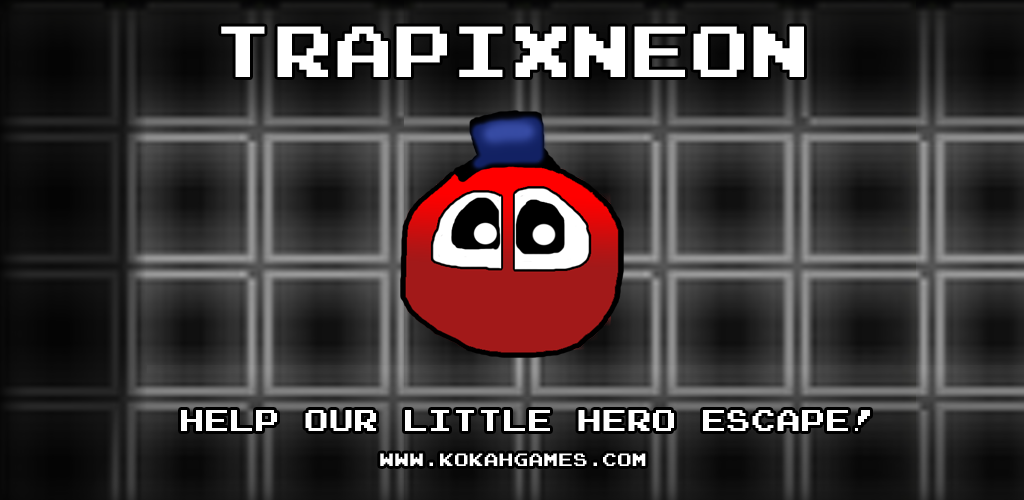
<style>
.page{position:relative;width:1024px;height:500px}
.page>*{position:absolute;margin:0}
.t1{font:72px "JoystixMonospace-Regular";color:#ffffff}
.t2{font:30px "JoystixMonospace-Regular";color:#ffffff}
.t3{font:18px "JoystixMonospace-Regular";color:#ffffff}
</style>
<div class="page">
<p class="t1" style="left:221px;top:26px;width:583px;height:51px">TrapiXneon</p>
<p class="t2" style="left:181px;top:410px;width:689px;height:21px">HELP OUR LITTLE HERO ESCAPE!</p>
<p class="t3" style="left:380px;top:453px;width:266px;height:13px">WWW.KOKAHGAMES.COM</p>
</div>
